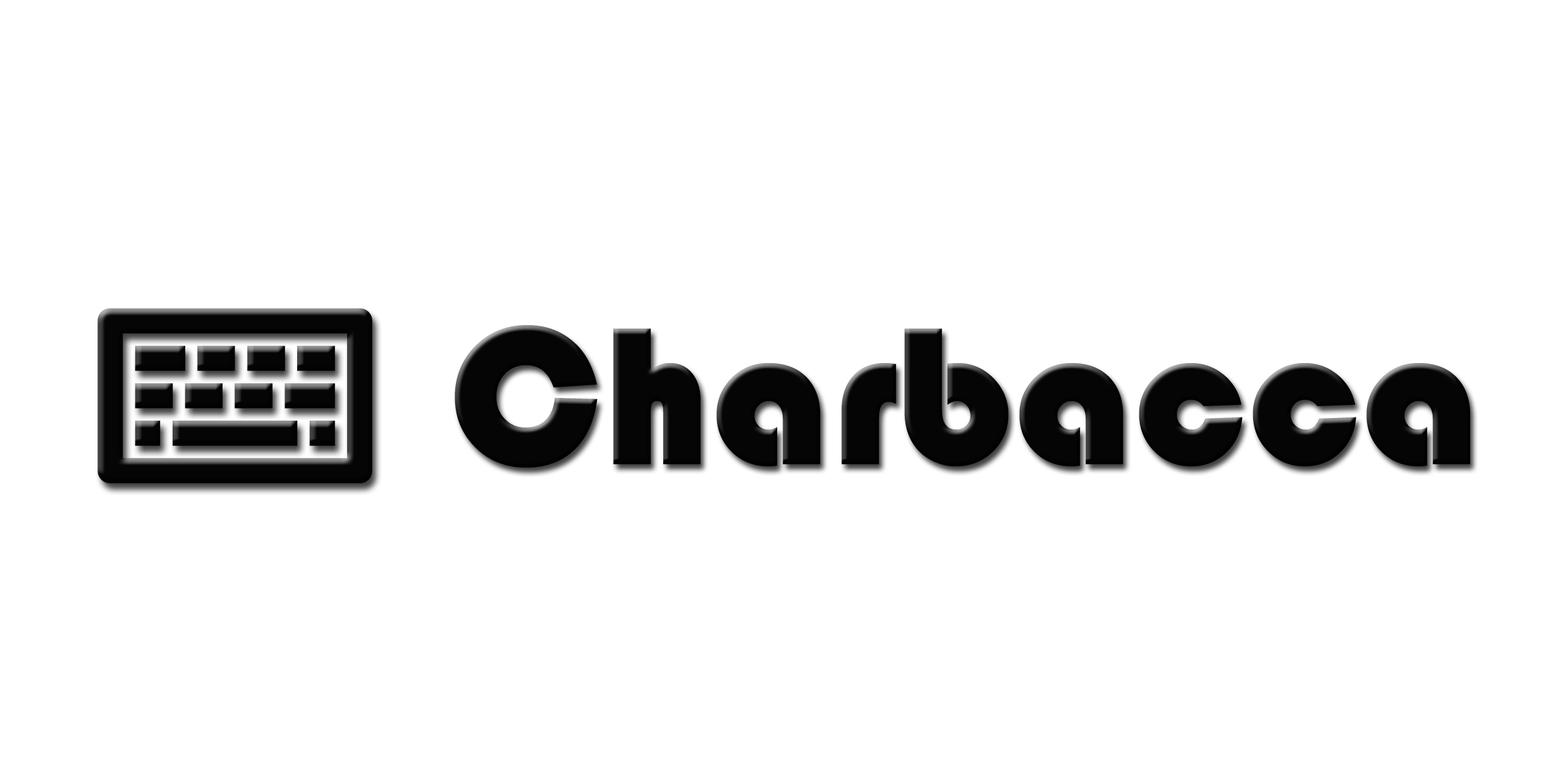
<style>
.page{position:relative;width:1568px;height:759px;background:#ffffff}
.page>*{position:absolute;margin:0}
.t1{font:203.6px "Bauhaus93";color:#050505}
</style>
<div class="page">
<p class="t1" style="left:455px;top:325px;width:1016px;height:143px">Charbacca</p>
</div>
